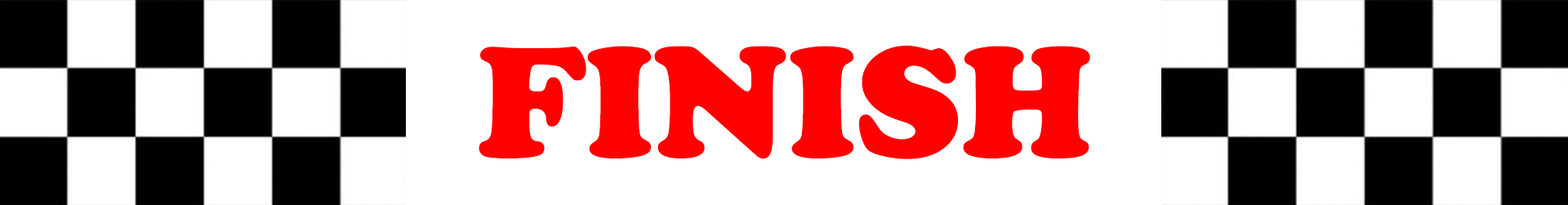
<style>
.page{position:relative;width:1568px;height:205px;background:#ffffff}
.page>*{position:absolute;margin:0}
.t1{font:163.3px "CooperBlack";color:#ff0000}
</style>
<div class="page">
<p class="t1" style="left:479px;top:45px;width:611px;height:114px">FINISH</p>
</div>
